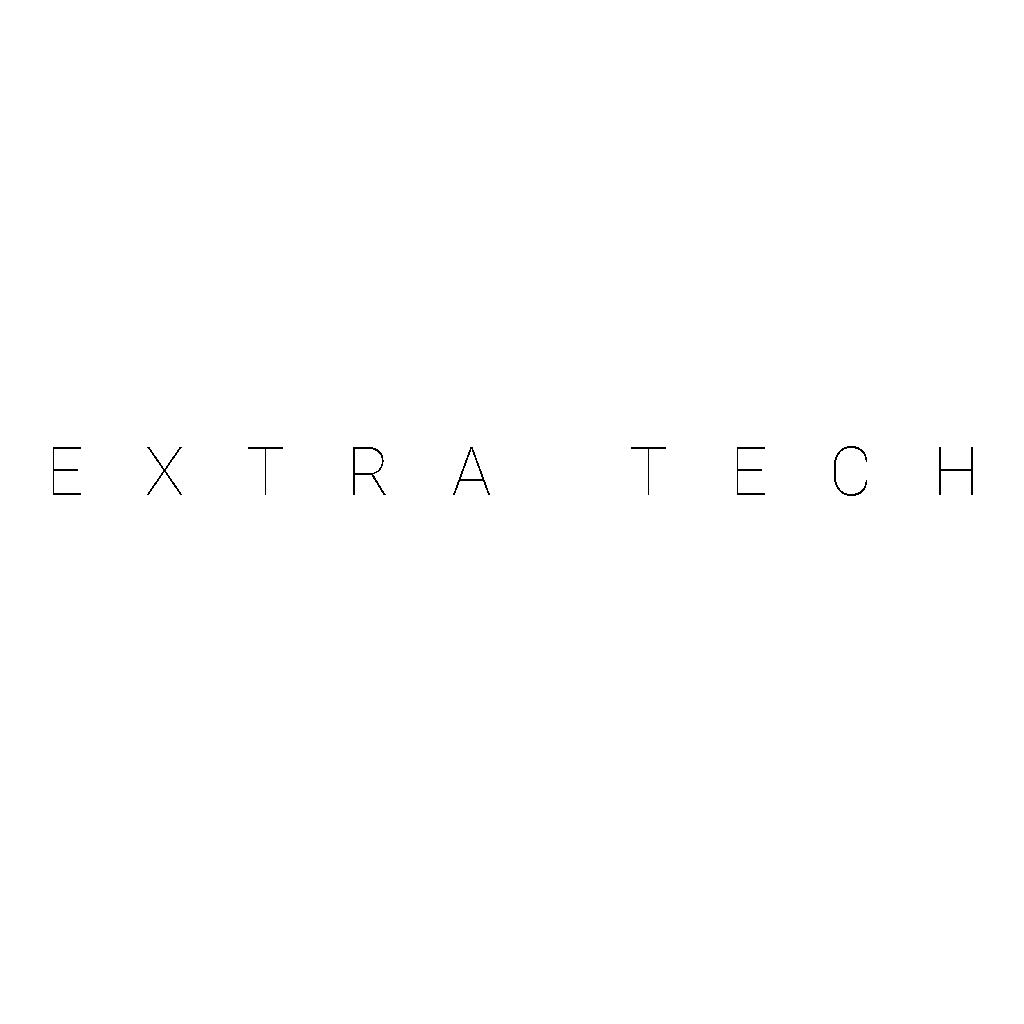
<style>
.page{position:relative;width:1024px;height:1024px;background:#ffffff}
.page>*{position:absolute;margin:0}
.t1{font:67.6px "Roboto-Thin";letter-spacing:0.94em;color:#000000}
</style>
<div class="page">
<p class="t1" style="left:53px;top:446px;width:920px;height:50px">EXTRA TECH</p>
</div>
